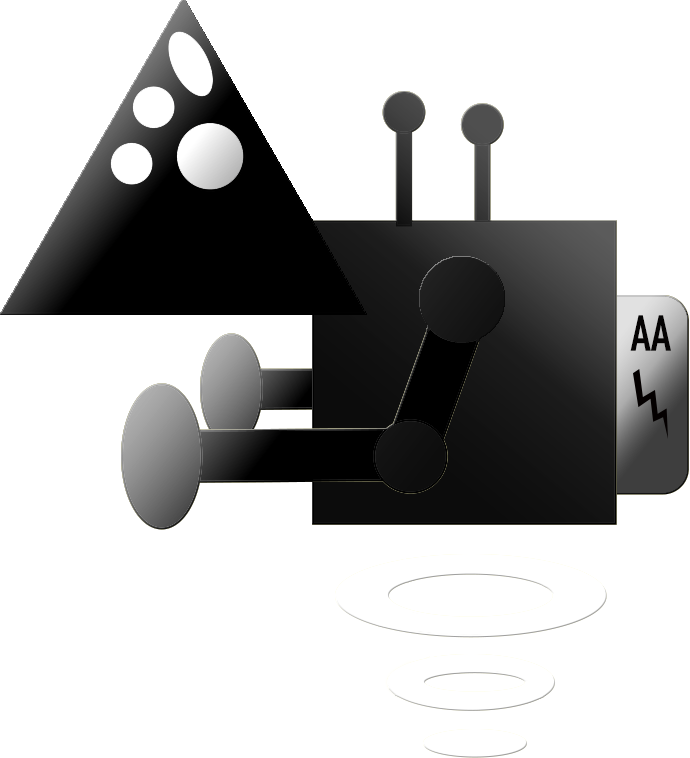
<style>
.page{position:relative;width:690px;height:758px;background:#ffffff}
.page>*{position:absolute;margin:0}
.t1{font:50px "DINCondensed-Bold";color:#050303}
</style>
<div class="page">
<p class="t1" style="left:630px;top:315px;width:41px;height:36px">AA</p>
</div>
